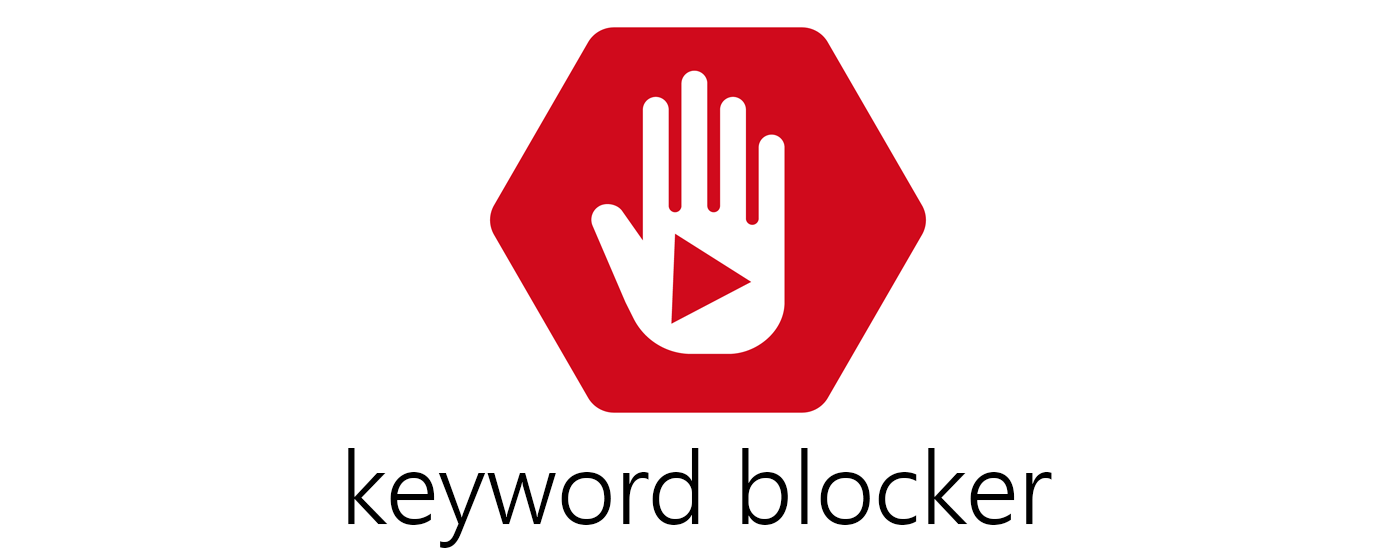
<style>
.page{position:relative;width:1400px;height:560px;background:#ffffff}
.page>*{position:absolute;margin:0}
.t1{font:101.8px "SegoeUI-Semilight";color:#000000}
</style>
<div class="page">
<p class="t1" style="left:348px;top:448px;width:704px;height:100px">keyword blocker</p>
</div>
